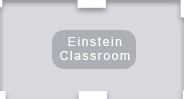
<style>
.page{position:relative;width:184px;height:99px;background:#d7d9de}
.page>*{position:absolute;margin:0}
.t1{font:12px "ArialMT";letter-spacing:0.136em;color:#ffffff}
</style>
<div class="page">
<p class="t1" style="left:60px;top:37px;width:70px;height:23px;text-align:center">Einstein<br>Classroom</p>
</div>
